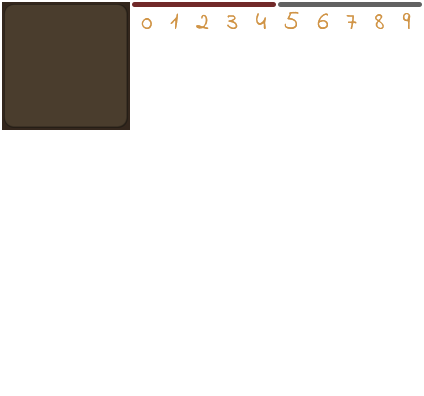
<style>
.page{position:relative;width:424px;height:396px;background:#ffffff}
.page>*{position:absolute;margin:0}
.t1{font:26px "IndieFlower";letter-spacing:0.15em;color:#d09446}
</style>
<div class="page">
<p class="t1" style="left:141px;top:11px;width:270px;height:18px">0 1 2 3 4 5 6 7 8 9</p>
</div>
